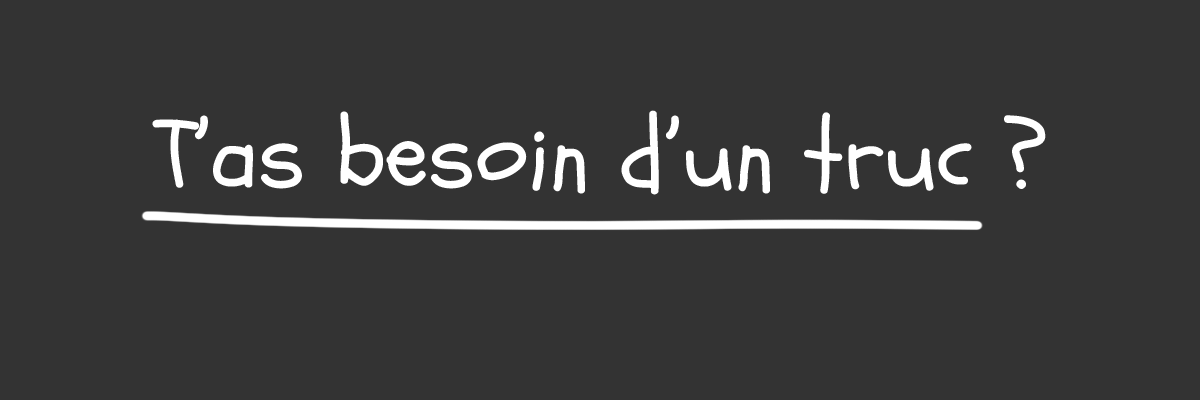
<style>
.page{position:relative;width:1200px;height:400px;background:#333333}
.page>*{position:absolute;margin:0}
.t1{font:98.5px "Schoolbell-Regular";color:#ffffff}
</style>
<div class="page">
<p class="t1" style="left:152px;top:110px;width:894px;height:85px">T’as besoin d’un truc ?</p>
</div>
